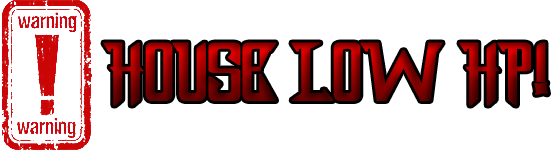
<style>
.page{position:relative;width:551px;height:150px;background:#ffffff}
.page>*{position:absolute;margin:0}
.t1{font:72px "DragonForcE";font-weight:bold}
</style>
<div class="page">
<p class="t1" style="left:103px;top:42px;width:445px;height:64px">HOUSE LOW HP!</p>
</div>
